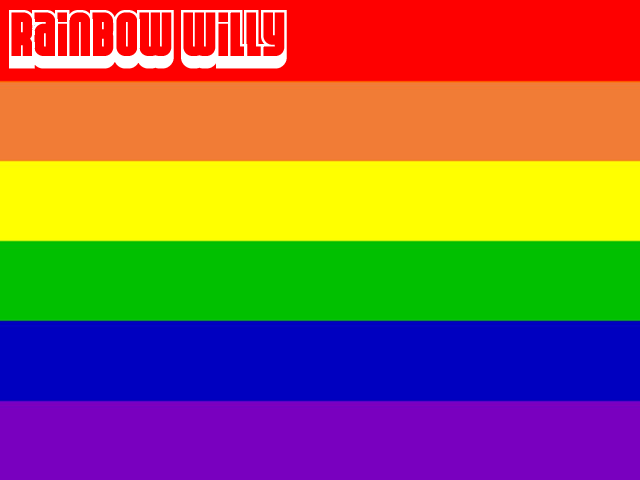
<style>
.page{position:relative;width:640px;height:480px}
.page>*{position:absolute;margin:0}
.t1{font:50px "Weltron2001";color:#ffffff}
</style>
<div class="page">
<p class="t1" style="left:9px;top:10px;width:278px;height:59px">Rainbow Willy</p>
</div>
